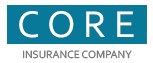
<style>
.page{position:relative;width:153px;height:63px;background:#097999}
.page>*{position:absolute;margin:0}
.t1{font:39px "Corbel";color:#ffffff;text-transform:uppercase}
.t2{font:11px "Corbel";color:#737373;text-transform:uppercase}
</style>
<div class="page">
<p class="t1" style="left:19px;top:11px;width:115px;height:27px">C O R E</p>
<p class="t2" style="left:23px;top:50px;width:109px;height:9px">Insurance Company</p>
</div>
